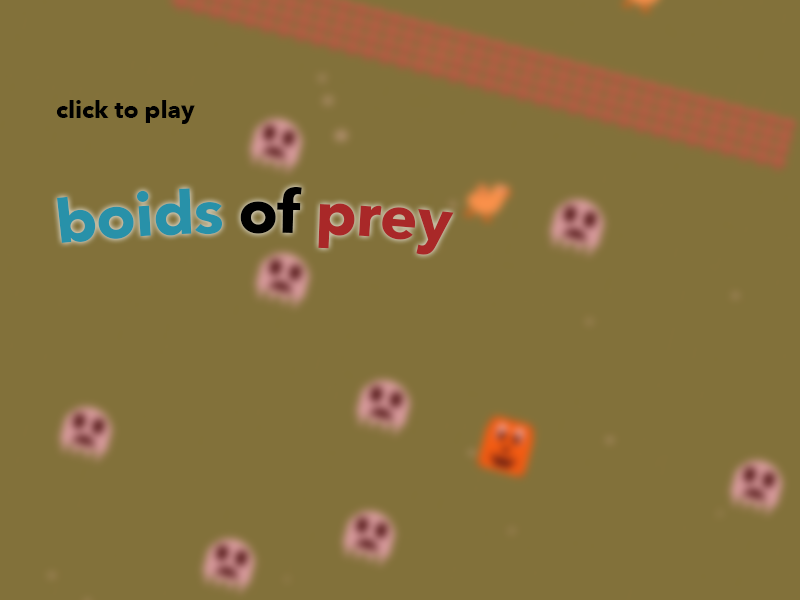
<style>
.page{position:relative;width:800px;height:600px;background:#82713a}
.page>*{position:absolute;margin:0}
.t1{font:12px "AvenirNext-Bold";color:#000000}
.t2{font:60px "AvenirNext-Bold";color:#2891a9}
.t3{font:60px "AvenirNext-Bold";color:#000000}
.t4{font:60px "AvenirNext-Bold";color:#a92828}
</style>
<div class="page">
<p class="t1" style="left:56px;top:100px;width:139px;height:24px">click to play</p>
<p class="t2" style="left:57px;top:187px;width:397px;height:68px">boids <span class="t3">of </span><span class="t4">prey</span></p>
</div>
